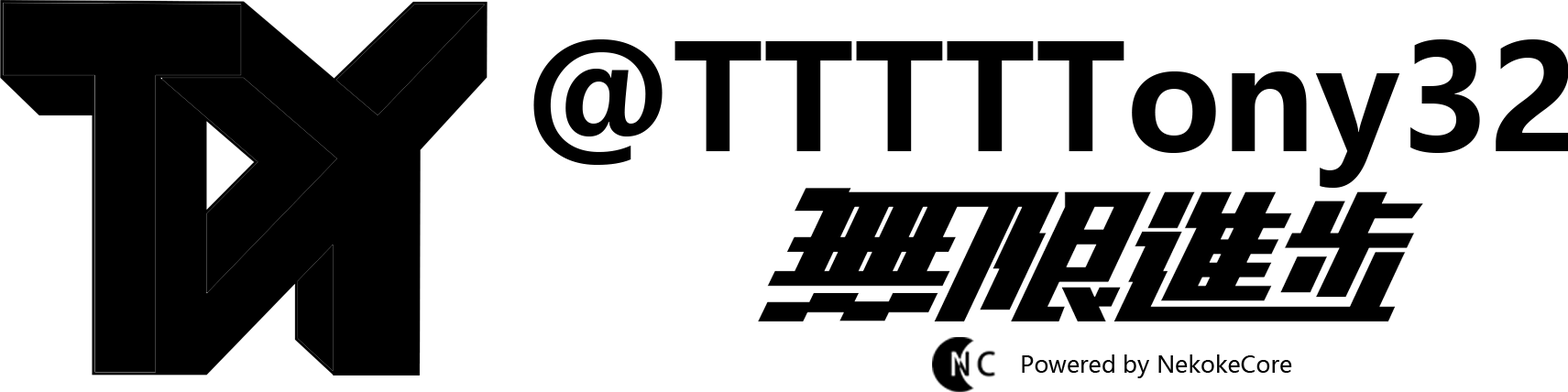
<style>
.page{position:relative;width:1568px;height:392px;background:#ffffff}
.page>*{position:absolute;margin:0}
.t1{font:145.1px "MicrosoftYaHei-Bold";color:#000000}
.t2{font:22.9px "MicrosoftYaHei";color:#000000}
</style>
<div class="page">
<p class="t1" style="left:533px;top:39px;width:1036px;height:149px">@TTTTTony32</p>
<p class="t2" style="left:1022px;top:355px;width:270px;height:23px">Powered by NekokeCore</p>
</div>
